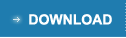
<style>
.page{position:relative;width:126px;height:38px;background:#1f7caf}
.page>*{position:absolute;margin:0}
.t1{font:14px "Arial-BoldMT";color:#ffffff}
</style>
<div class="page">
<p class="t1" style="left:29px;top:14px;width:83px;height:11px">DOWNLOAD</p>
</div>
